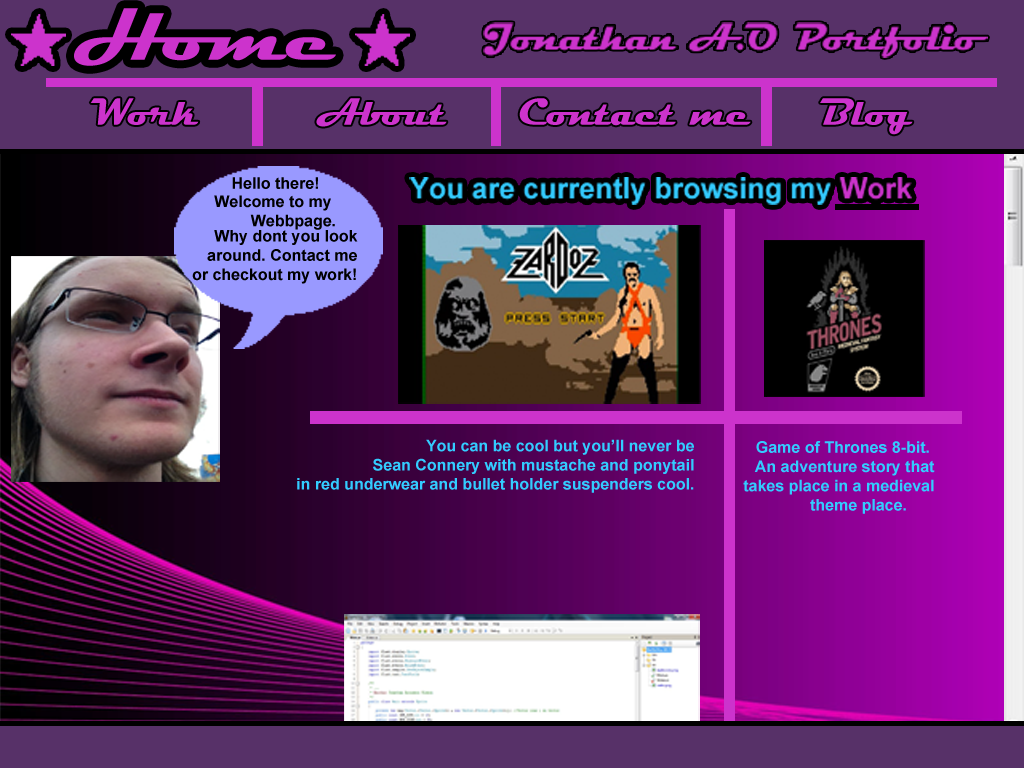
<style>
.page{position:relative;width:1024px;height:768px}
.page>*{position:absolute;margin:0}
.t1{font:67.8px "Magneto-Bold";color:#cc33cc;scale:1.18 1}
.t2{font:38.4px "Magneto-Bold";color:#cc33cc}
.t3{font:16px "Arial-BoldMT";color:#000000}
.t4{font:16px "Arial-BoldMT";color:#33ccff}
</style>
<div class="page">
<p class="t1" style="left:74px;top:8px;width:262px;height:58px">Home</p>
<p class="t2" style="left:90px;top:98px;width:109px;height:27px">Work</p>
<p class="t2" style="left:316px;top:98px;width:131px;height:29px">About</p>
<p class="t2" style="left:519px;top:98px;width:232px;height:28px">Contact me</p>
<p class="t2" style="left:820px;top:98px;width:93px;height:37px">Blog</p>
<p class="t3" style="left:232px;top:177px;width:86px;height:12px">Hello there!</p>
<p class="t3" style="left:214px;top:195px;width:121px;height:35px;text-align:right">Welcome to my <br>Webbpage.</p>
<p class="t3" style="left:192px;top:230px;width:166px;height:54px;text-align:right">Why dont you look<br>around. Contact me<br>or checkout my work!</p>
<p class="t4" style="left:297px;top:439px;width:397px;height:54px;text-align:right">You can be cool but you’ll never be<br>Sean Connery with mustache and ponytail<br>in red underwear and bullet holder suspenders cool.</p>
<p class="t4" style="left:743px;top:441px;width:192px;height:73px;text-align:right">Game of Thrones 8-bit. <br>An adventure story that<br>takes place in a medieval<br>theme place.</p>
</div>
